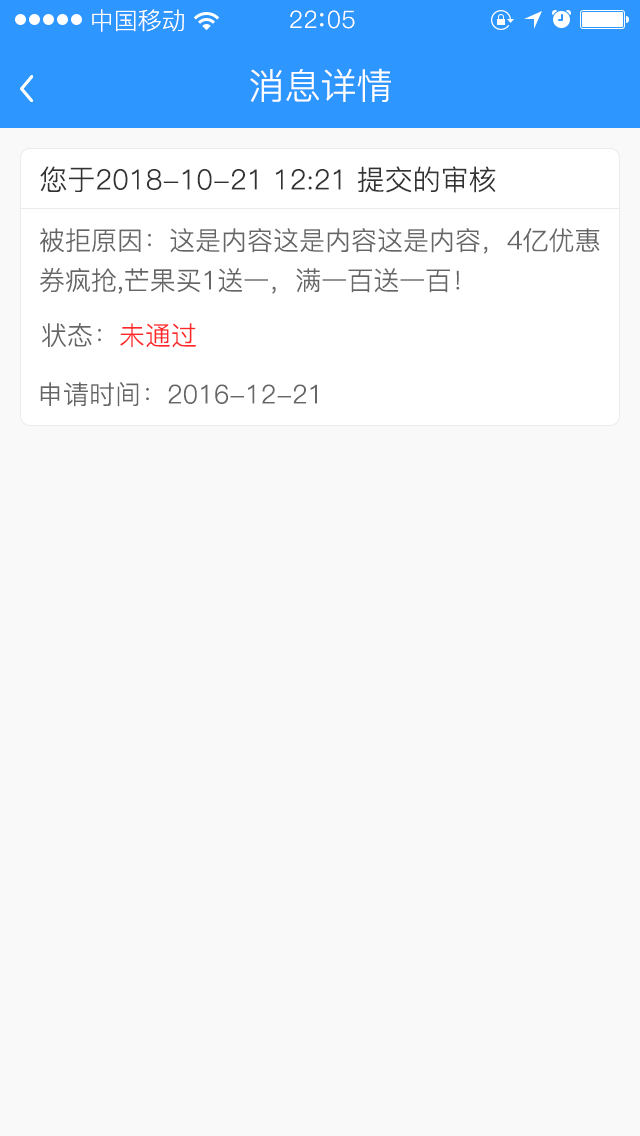
<style>
.page{position:relative;width:640px;height:1136px;background:#f9f9f9}
.page>*{position:absolute;margin:0}
.t1{font:24px "PingFang-SC-Regular";color:#ffffff}
.t2{font:24px "PingFang-SC-Regular";letter-spacing:0.03em;color:#ffffff}
.t3{font:36px "PingFang-SC-Regular";color:#ffffff}
.t4{font:28px "PingFang-SC-Regular";color:#333333}
.t5{font:26px/40px "PingFang-SC-Regular";color:#666666}
.t6{font:26px "PingFang-SC-Regular";color:#666666}
.t7{font:26px "PingFang-SC-Regular";color:#ff2828}
</style>
<div class="page">
<p class="t1" style="left:92px;top:9px;width:92px;height:23px">中国移动</p>
<p class="t2" style="left:290px;top:10px;width:65px;height:19px">22 05</p>
<p class="t3" style="left:250px;top:68px;width:141px;height:34px">消息详情</p>
<p class="t4" style="left:40px;top:166px;width:456px;height:27px">您于2018-10-21 12:21 提交的审核</p>
<p class="t5" style="left:40px;top:228px;width:560px;height:66px">被拒原因：这是内容这是内容这是内容，4亿优惠<br>券疯抢,芒果买1送一，满一百送一百！</p>
<p class="t6" style="left:42px;top:323px;width:154px;height:25px">状态：<span class="t7">未通过</span></p>
<p class="t6" style="left:40px;top:382px;width:277px;height:25px">申请时间：2016-12-21</p>
</div>
